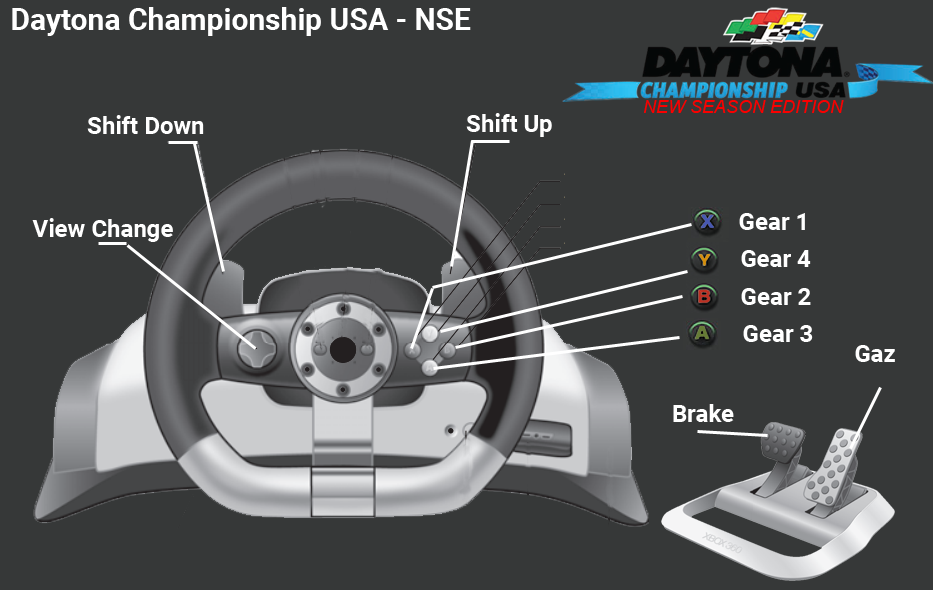
<style>
.page{position:relative;width:933px;height:590px;background:#363838}
.page>*{position:absolute;margin:0}
.t1{font:30px "Roboto-Bold";color:#ffffff}
.t2{font:18px "Arial-ItalicMT";color:#fb0000}
.t3{font:24px "Roboto-Bold";color:#ffffff}
</style>
<div class="page">
<p class="t1" style="left:12px;top:7px;width:459px;height:29px">Daytona Championship USA - NSE</p>
<p class="t2" style="left:644px;top:100px;width:200px;height:13px">NEW SEASON EDITION</p>
<p class="t3" style="left:466px;top:113px;width:86px;height:24px">Shift Up</p>
<p class="t3" style="left:87px;top:115px;width:117px;height:19px">Shift Down</p>
<p class="t3" style="left:32px;top:218px;width:141px;height:24px">View Change</p>
<p class="t3" style="left:739px;top:213px;width:66px;height:17px">Gear 1</p>
<p class="t3" style="left:741px;top:250px;width:70px;height:17px">Gear 4</p>
<p class="t3" style="left:741px;top:288px;width:70px;height:17px">Gear 2</p>
<p class="t3" style="left:743px;top:325px;width:70px;height:17px">Gear 3</p>
<p class="t3" style="left:855px;top:345px;width:40px;height:17px">Gaz</p>
<p class="t3" style="left:673px;top:404px;width:61px;height:18px">Brake</p>
</div>
